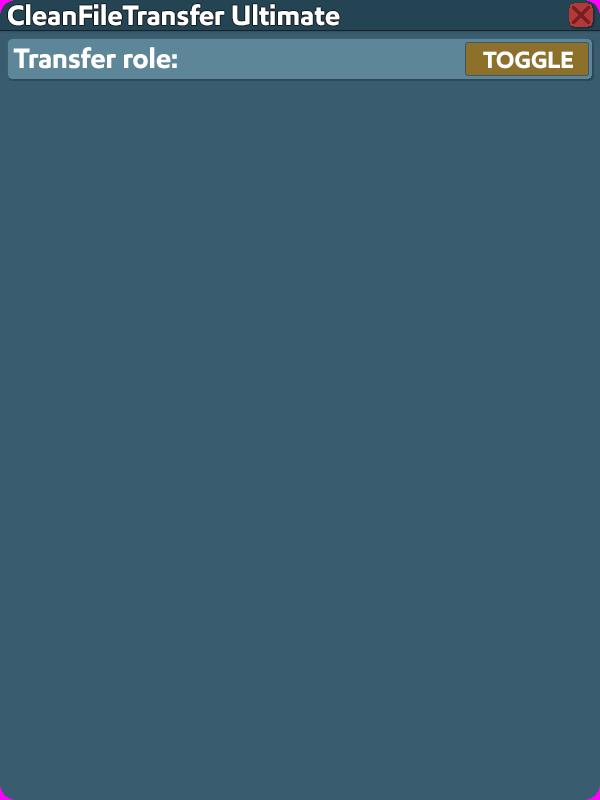
<style>
.page{position:relative;width:600px;height:800px;background:#395d6e}
.page>*{position:absolute;margin:0}
.t1{font:28px "EMprint-Bold";color:#ffffff}
.t2{font:23.5px "EMprint-Bold";color:#ffffff}
</style>
<div class="page">
<p class="t1" style="left:8px;top:4px;width:332px;height:22px">CleanFileTransfer Ultimate</p>
<p class="t1" style="left:13px;top:47px;width:164px;height:22px">Transfer role:</p>
<p class="t2" style="left:483px;top:51px;width:90px;height:18px">TOGGLE</p>
</div>
